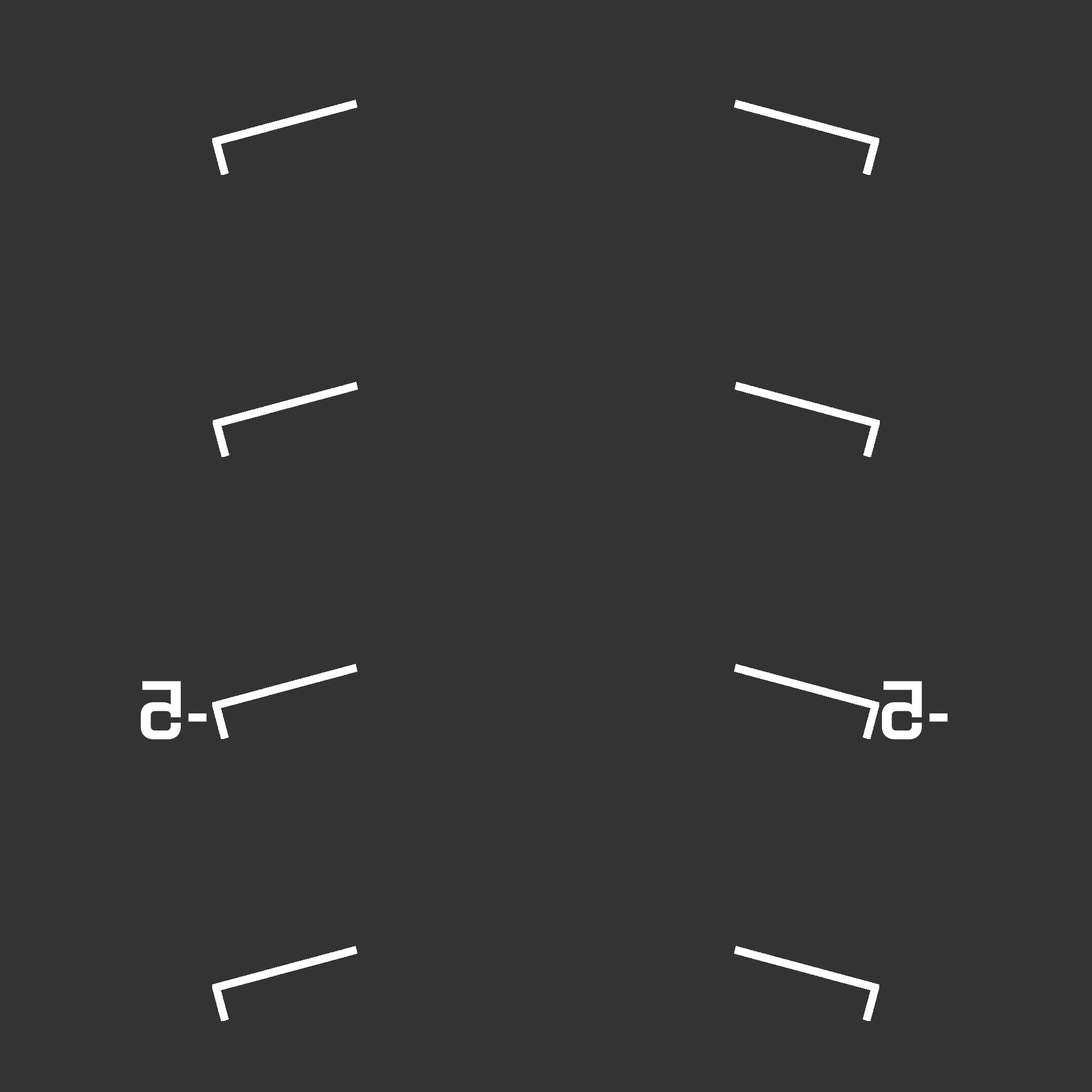
<style>
.page{position:relative;width:1092px;height:1092px;background:#333333}
.page>*{position:absolute;margin:0}
.t1{font:82.9px "Purista-SemiBold";color:#ffffff}
</style>
<div class="page">
<p class="t1" style="left:141px;top:681px;width:66px;height:59px;rotate:180deg">-5</p>
<p class="t1" style="left:882px;top:681px;width:65px;height:59px;rotate:180deg">-5</p>
</div>
